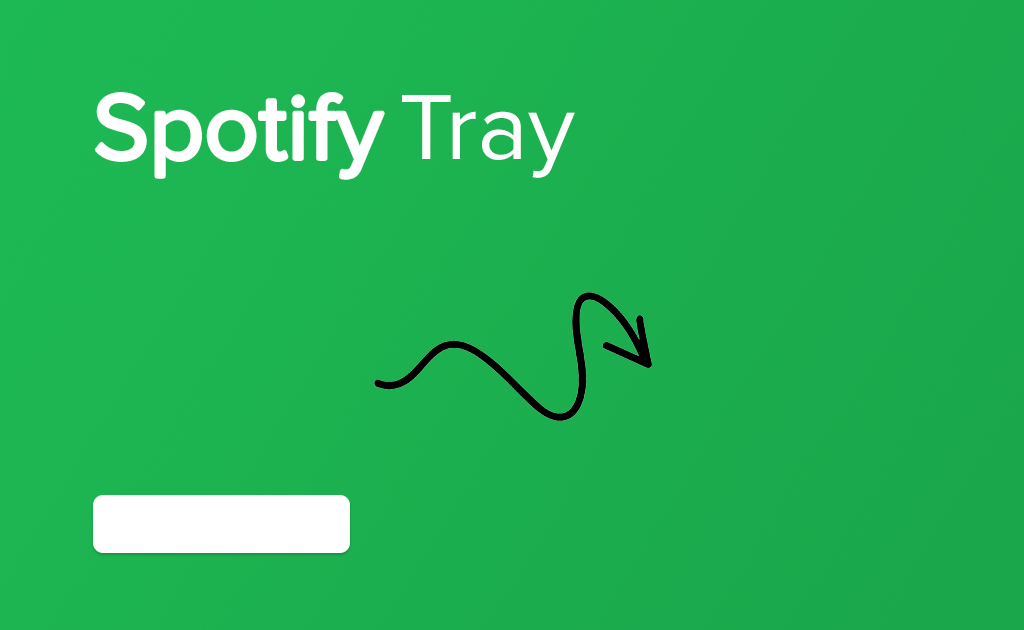
<style>
.page{position:relative;width:1024px;height:630px}
.page>*{position:absolute;margin:0}
.t1{font:96px "ProximaNova-Regular";color:#ffffff}
</style>
<div class="page">
<p class="t1" style="left:96px;top:94px;width:287px;height:84px">Spotify</p>
<p class="t1" style="left:402px;top:95px;width:173px;height:83px">Tray</p>
</div>
